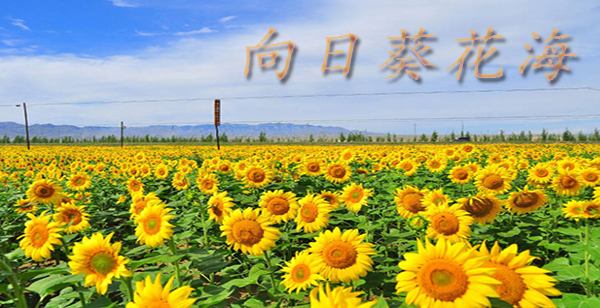
<style>
.page{position:relative;width:600px;height:308px}
.page>*{position:absolute;margin:0}
.t1{font:60.9px "¿¬Ìå";letter-spacing:0.05em;color:#dbac7d;font-style:italic;scale:1.09 1}
</style>
<div class="page">
<p class="t1" style="left:243px;top:26px;width:335px;height:56px">向日葵花海</p>
</div>
